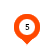
<style>
.page{position:relative;width:55px;height:55px;background:#ffffff}
.page>*{position:absolute;margin:0}
.t1{font:8px "Avenir-Roman";color:#000000}
</style>
<div class="page">
<p class="t1" style="left:25px;top:24px;width:5px;height:6px">5</p>
</div>
